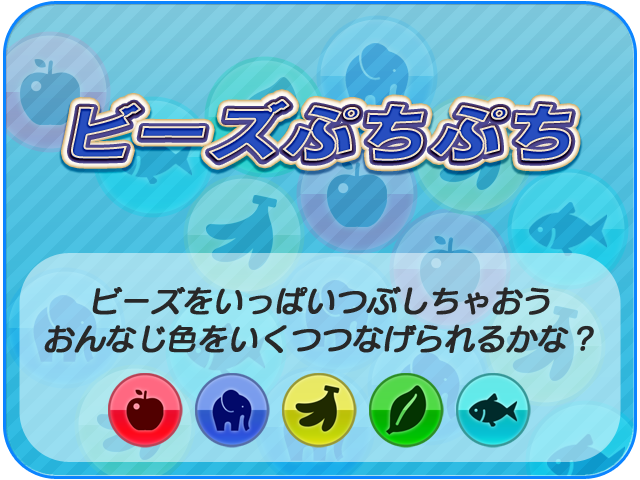
<style>
.page{position:relative;width:640px;height:480px}
.page>*{position:absolute;margin:0}
.t1{font:64.8px "RodinPro-DB";font-weight:bold;font-style:italic;scale:1.11 1}
.t2{font:30px "SeuratPro-DB";color:#282828;font-weight:bold;font-style:italic}
</style>
<div class="page">
<p class="t1" style="left:71px;top:99px;width:500px;height:63px">ビーズぷちぷち</p>
<p class="t2" style="left:92px;top:286px;width:458px;height:29px">ビーズをいっぱいつぶしちゃおう</p>
<p class="t2" style="left:44px;top:324px;width:550px;height:29px">おんなじ色をいくつつなげられるかな？</p>
</div>
